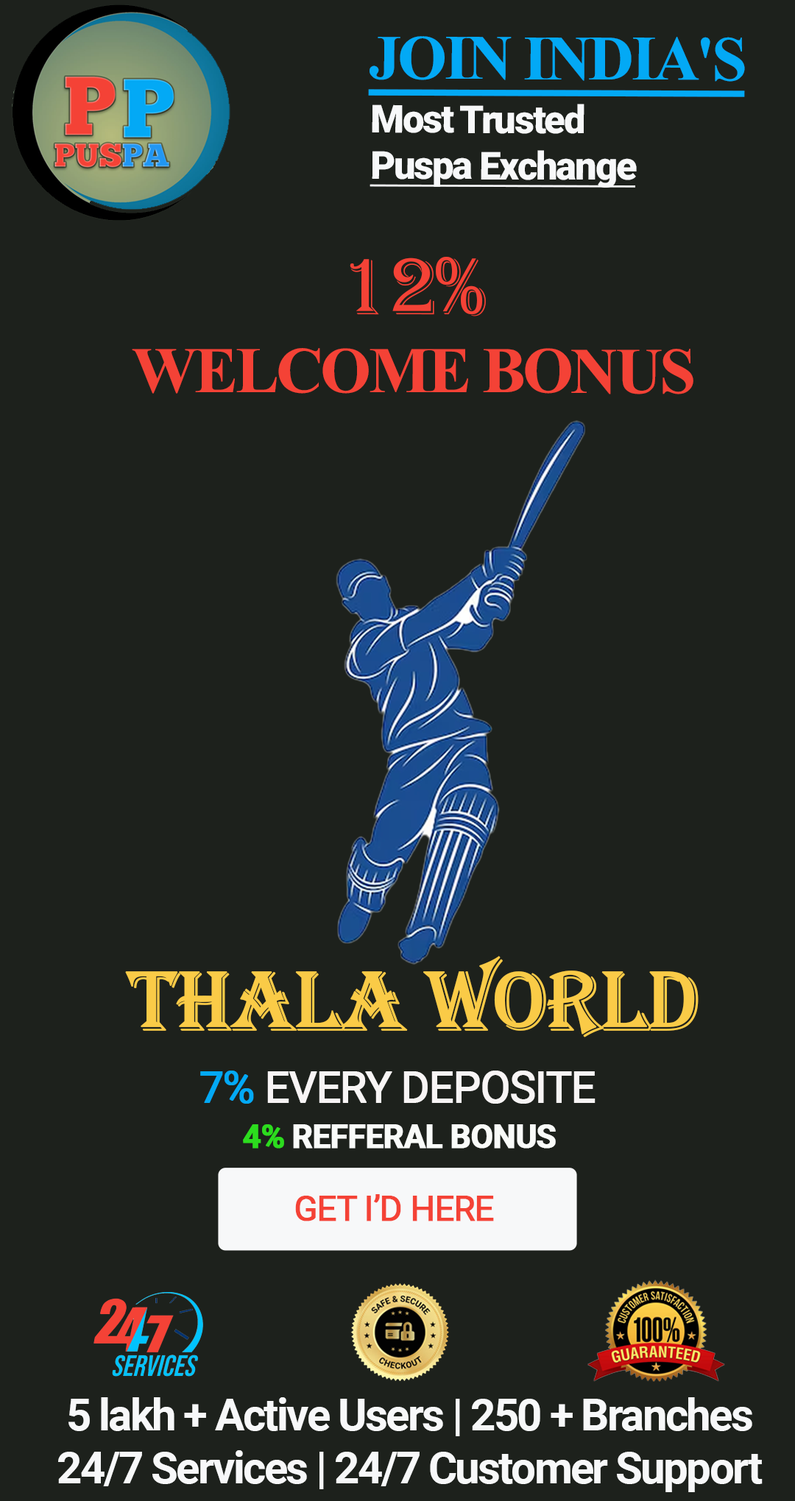
<style>
.page{position:relative;width:795px;height:1501px;background:#1d211c}
.page>*{position:absolute;margin:0}
.t1{font:63.2px "TimesNewRomanPS-BoldMT";letter-spacing:-0.04em;color:#03a9f5;text-decoration:underline}
.t2{font:38.6px "Roboto-Black";letter-spacing:-0.04em;color:#f7f8f9;text-decoration:underline}
.t3{font:38.6px "Roboto-Black";letter-spacing:-0.04em;color:#f7f8f9}
.t4{font:65.1px "TimesNewRomanPS-BoldMT";letter-spacing:-0.04em;color:#f44236}
.t5{font:83.7px "Algerian";letter-spacing:-0.04em;color:#f44236}
.t6{font:86.7px "Algerian";letter-spacing:-0.04em;color:#facb47;text-transform:uppercase;font-weight:bold}
.t7{font:43.5px "Roboto-Regular";letter-spacing:-0.04em;color:#f8f5f5;text-transform:uppercase;font-weight:bold}
.t8{font:43.5px "Roboto-Regular";letter-spacing:-0.04em;color:#03a9f5;text-transform:uppercase;font-weight:bold}
.t9{font:32.7px "Roboto-Bold";letter-spacing:-0.04em;color:#f9fbf9;text-transform:uppercase;font-weight:bold}
.t10{font:32.7px "Roboto-Bold";letter-spacing:-0.04em;color:#2cdc1e;text-transform:uppercase;font-weight:bold}
.t11{font:34.7px "Roboto-Regular";letter-spacing:-0.04em;color:#f44236;text-transform:uppercase;font-weight:bold}
.t12{font:43.8px "Roboto-Bold";letter-spacing:-0.04em;color:#f7f8f9}
</style>
<div class="page">
<p class="t1" style="left:368px;top:36px;width:377px;height:61px">JOIN INDIA'S</p>
<p class="t2" style="left:369px;top:104px;width:267px;height:84px"><span class="t3">Most Trusted<br></span>Puspa Exchange</p>
<p class="t4" style="left:132px;top:257px;width:561px;height:137px;text-align:center"><span class="t5">12%<br></span>WELCOME BONUS</p>
<p class="t6" style="left:125px;top:956px;width:573px;height:81px">Thala World</p>
<p class="t7" style="left:200px;top:1070px;width:395px;height:34px"><span class="t8">7% </span>eVERY DEPOSITE</p>
<p class="t9" style="left:243px;top:1124px;width:312px;height:24px"><span class="t10">4% </span>REFFERAL BONUS</p>
<p class="t11" style="left:295px;top:1194px;width:199px;height:27px">GET I’D HERE</p>
<p class="t12" style="left:58px;top:1397px;width:704px;height:95px;text-align:center">5 lakh + Active Users | 250 + Branches<br>24/7 Services | 24/7 Customer Support</p>
</div>
